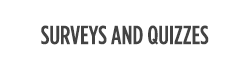
<style>
.page{position:relative;width:250px;height:70px;background:#ffffff}
.page>*{position:absolute;margin:0}
.t1{font:26px "GothamCondensed-Medium";color:#434343}
</style>
<div class="page">
<p class="t1" style="left:41px;top:25px;width:168px;height:20px">SURVEYS AND QUIZZES</p>
</div>
